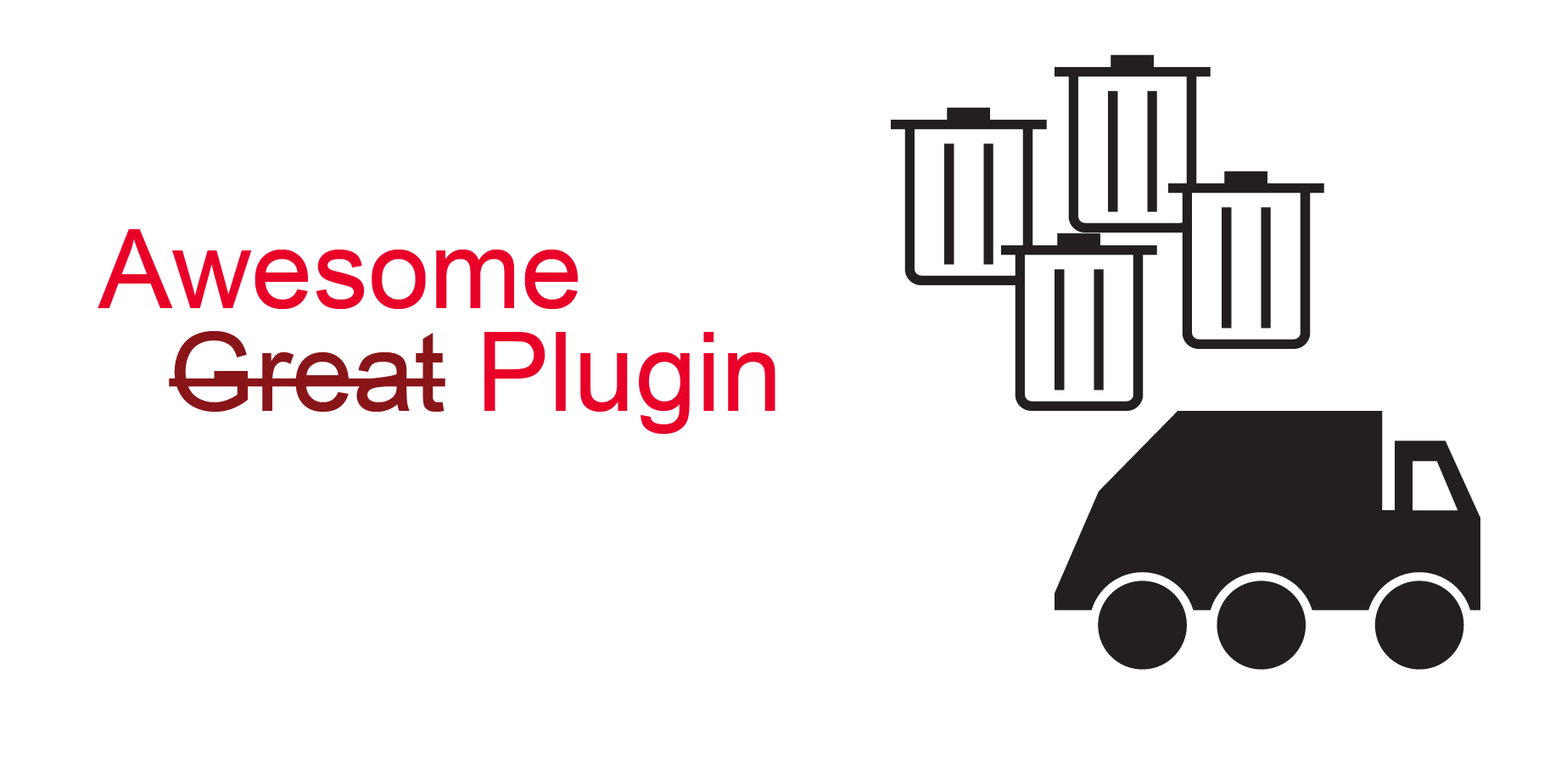
<style>
.page{position:relative;width:1561px;height:764px;background:#ffffff}
.page>*{position:absolute;margin:0}
.t1{font:110.3px "ArialMT";color:#e90029}
.t2{font:110.3px "ArialMT";color:#891518}
</style>
<div class="page">
<p class="t1" style="left:98px;top:229px;width:480px;height:80px">Awesome</p>
<p class="t1" style="left:169px;top:331px;width:607px;height:103px"><span class="t2">Great</span> Plugin</p>
</div>
